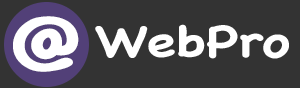
<style>
.page{position:relative;width:300px;height:88px;background:#333333}
.page>*{position:absolute;margin:0}
.t1{font:70.6px "ChalkboardSE-Bold";color:#ffffff;scale:1.25 1}
.t2{font:43.1px "ChalkboardSE-Bold";color:#ffffff;scale:1.25 1}
</style>
<div class="page">
<p class="t1" style="left:13px;top:16px;width:66px;height:56px">@</p>
<p class="t2" style="left:95px;top:24px;width:194px;height:35px">WebPro</p>
</div>
